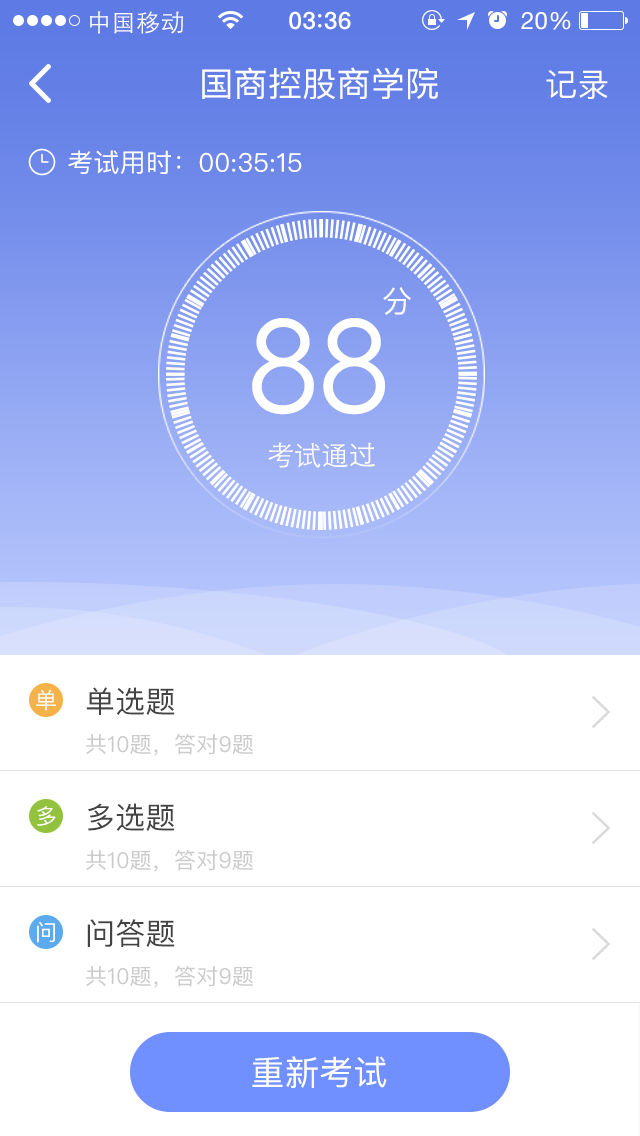
<style>
.page{position:relative;width:640px;height:1136px;background:#ffffff}
.page>*{position:absolute;margin:0}
.t1{font:24px "STHeitiSC-Light";letter-spacing:0.02em;color:#ffffff}
.t2{font:24px "HelveticaNeue-Medium";letter-spacing:0.03em;color:#ffffff}
.t3{font:24px "HelveticaNeue";letter-spacing:0.02em;color:#ffffff}
.t4{font:34px "PingFangSC-Regular";letter-spacing:0.01em;color:#ffffff}
.t5{font:32px "PingFangSC-Regular";letter-spacing:0.01em;color:#ffffff}
.t6{font:26px "PingFangSC-Regular";letter-spacing:0.01em;color:#ffffff}
.t7{font:30.6px "PingFangSC-Regular";letter-spacing:0.01em;color:#ffffff}
.t8{font:127.1px "STHeitiSC-Light";letter-spacing:0.01em;color:#ffffff}
.t9{font:27.3px "STHeitiSC-Light";letter-spacing:0.01em;color:#ffffff}
.t10{font:22px "PingFangSC-Regular";letter-spacing:0.01em;color:#ffffff}
.t11{font:30px "PingFangSC-Regular";letter-spacing:0.01em;color:#434343}
.t12{font:22px "PingFangSC-Regular";letter-spacing:0.01em;color:#cbcbcb}
</style>
<div class="page">
<p class="t1" style="left:90px;top:11px;width:93px;height:23px">中国移动</p>
<p class="t2" style="left:289px;top:11px;width:62px;height:19px">03 36</p>
<p class="t3" style="left:521px;top:11px;width:50px;height:19px">20%</p>
<p class="t4" style="left:202px;top:67px;width:236px;height:33px">国商控股商学院</p>
<p class="t5" style="left:546px;top:70px;width:62px;height:29px">记录</p>
<p class="t6" style="left:68px;top:150px;width:234px;height:24px">考试用时：00:35:15</p>
<p class="t7" style="left:383px;top:287px;width:28px;height:28px">分</p>
<p class="t8" style="left:252px;top:318px;width:133px;height:97px">88</p>
<p class="t9" style="left:268px;top:442px;width:107px;height:26px">考试通过</p>
<p class="t10" style="left:36px;top:689px;width:20px;height:22px">单</p>
<p class="t11" style="left:86px;top:687px;width:89px;height:28px">单选题</p>
<p class="t12" style="left:86px;top:733px;width:167px;height:23px">共10题，答对9题</p>
<p class="t10" style="left:37px;top:806px;width:19px;height:20px">多</p>
<p class="t11" style="left:88px;top:803px;width:87px;height:28px">多选题</p>
<p class="t12" style="left:86px;top:849px;width:167px;height:23px">共10题，答对9题</p>
<p class="t10" style="left:37px;top:921px;width:18px;height:22px">问</p>
<p class="t11" style="left:87px;top:919px;width:88px;height:28px">问答题</p>
<p class="t12" style="left:86px;top:965px;width:167px;height:23px">共10题，答对9题</p>
<p class="t4" style="left:252px;top:1056px;width:135px;height:32px">重新考试</p>
</div>
